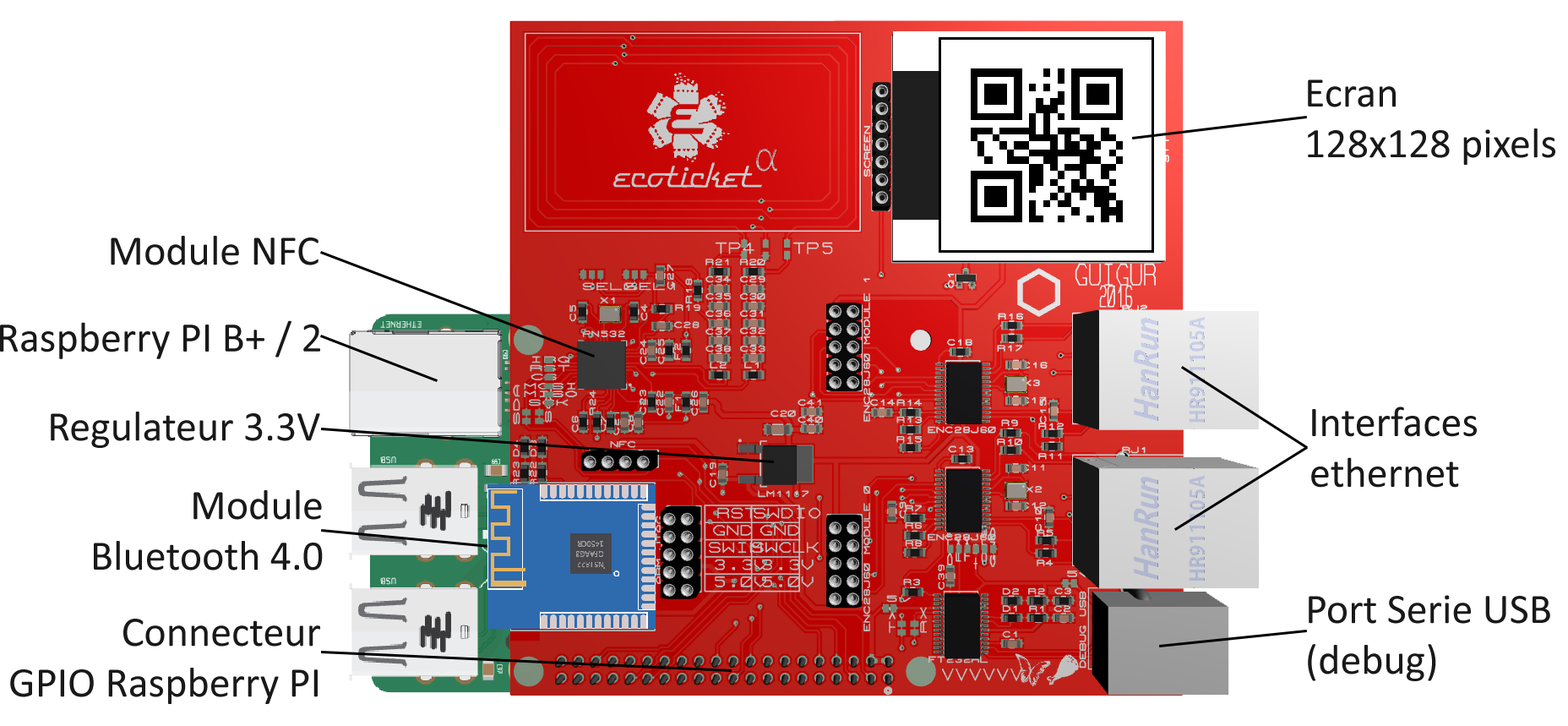
<style>
.page{position:relative;width:1568px;height:726px;background:#ffffff}
.page>*{position:absolute;margin:0}
.t1{font:42.2px "Calibri";color:#191919}
</style>
<div class="page">
<p class="t1" style="left:1308px;top:79px;width:247px;height:86px">Ecran<br>128x128 pixels</p>
<p class="t1" style="left:111px;top:236px;width:207px;height:29px">Module NFC</p>
<p class="t1" style="left:0px;top:320px;width:320px;height:39px">Raspberry PI B+ / 2</p>
<p class="t1" style="left:51px;top:411px;width:269px;height:37px">Regulateur 3.3V</p>
<p class="t1" style="left:1311px;top:406px;width:166px;height:81px">Interfaces<br>ethernet</p>
<p class="t1" style="left:94px;top:490px;width:229px;height:80px;text-align:right">Module<br>Bluetooth 4.0</p>
<p class="t1" style="left:1308px;top:595px;width:242px;height:86px">Port Serie USB<br>(debug)</p>
<p class="t1" style="left:10px;top:618px;width:310px;height:86px;text-align:right">Connecteur<br>GPIO Raspberry PI</p>
</div>
